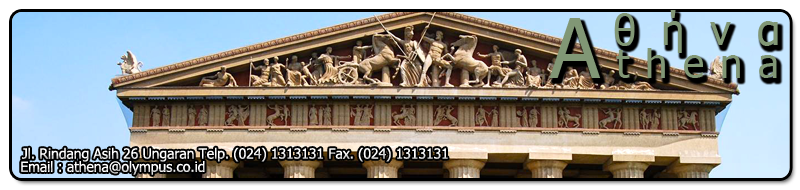
<style>
.page{position:relative;width:800px;height:190px}
.page>*{position:absolute;margin:0}
.t1{font:14px "Tahoma";letter-spacing:-0.005em;color:#ffffff}
</style>
<div class="page">
<p class="t1" style="left:22px;top:147px;width:426px;height:15px">Jl. Rindang Asih 26 Ungaran Telp. (024) 1313131 Fax. (024) 1313131</p>
<p class="t1" style="left:21px;top:161px;width:184px;height:14px">Email : athena@olympus.co.id</p>
</div>
